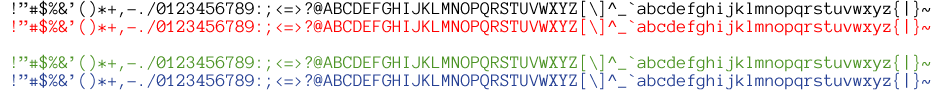
<style>
.page{position:relative;width:940px;height:90px;background:#ffffff}
.page>*{position:absolute;margin:0}
.t1{font:18px "AnonymousPro";color:#000000}
.t2{font:18px "AnonymousPro";color:#ff0000}
.t3{font:18px "AnonymousPro";color:#4d9426}
.t4{font:18px "AnonymousPro";color:#264094}
</style>
<div class="page">
<p class="t1" style="left:13px;top:0px;width:918px;height:18px">!”#$%&amp;’()*+,-./0123456789:;&lt;=&gt;?@ABCDEFGHIJKLMNOPQRSTUVWXYZ[\]^_`abcdefghijklmnopqrstuvwxyz{|}~</p>
<p class="t2" style="left:13px;top:18px;width:918px;height:18px">!”#$%&amp;’()*+,-./0123456789:;&lt;=&gt;?@ABCDEFGHIJKLMNOPQRSTUVWXYZ[\]^_`abcdefghijklmnopqrstuvwxyz{|}~</p>
<p class="t3" style="left:13px;top:54px;width:918px;height:18px">!”#$%&amp;’()*+,-./0123456789:;&lt;=&gt;?@ABCDEFGHIJKLMNOPQRSTUVWXYZ[\]^_`abcdefghijklmnopqrstuvwxyz{|}~</p>
<p class="t4" style="left:13px;top:72px;width:918px;height:18px">!”#$%&amp;’()*+,-./0123456789:;&lt;=&gt;?@ABCDEFGHIJKLMNOPQRSTUVWXYZ[\]^_`abcdefghijklmnopqrstuvwxyz{|}~</p>
</div>
